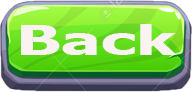
<style>
.page{position:relative;width:192px;height:92px}
.page>*{position:absolute;margin:0}
.t1{font:40.6px "Tahoma-Bold";color:#fbf2f2;scale:1.63 1}
</style>
<div class="page">
<p class="t1" style="left:21px;top:24px;width:156px;height:31px">Back</p>
</div>
